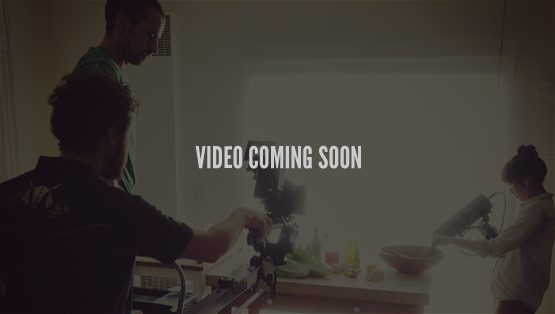
<style>
.page{position:relative;width:555px;height:314px}
.page>*{position:absolute;margin:0}
.t1{font:30.2px "LeagueGothic-Regular";letter-spacing:0.005em;color:#cccccc}
</style>
<div class="page">
<p class="t1" style="left:195px;top:145px;width:166px;height:24px">VIDEO COMING SOON</p>
</div>
